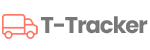
<style>
.page{position:relative;width:150px;height:50px;background:#ffffff}
.page>*{position:absolute;margin:0}
.t1{font:22.6px "Poppins-Bold";letter-spacing:-0.05em;color:#777777}
</style>
<div class="page">
<p class="t1" style="left:41px;top:16px;width:107px;height:18px">T-Tracker</p>
</div>
